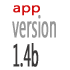
<style>
.page{position:relative;width:70px;height:70px;background:#ffffff}
.page>*{position:absolute;margin:0}
.t1{font:13px "SegoeUI";color:#d20f0f;font-weight:bold;scale:1.23 1}
.t2{font:30.9px "SegoeCondensed";color:#979797;font-weight:bold;scale:0.53 1}
.t3{font:30.9px "SegoeCondensed";color:#393737;font-weight:bold;scale:0.53 1}
</style>
<div class="page">
<p class="t1" style="left:13px;top:5px;width:27px;height:11px">app</p>
<p class="t2" style="left:12px;top:15px;width:44px;height:23px">version</p>
<p class="t3" style="left:13px;top:43px;width:26px;height:24px">1.4b</p>
</div>
